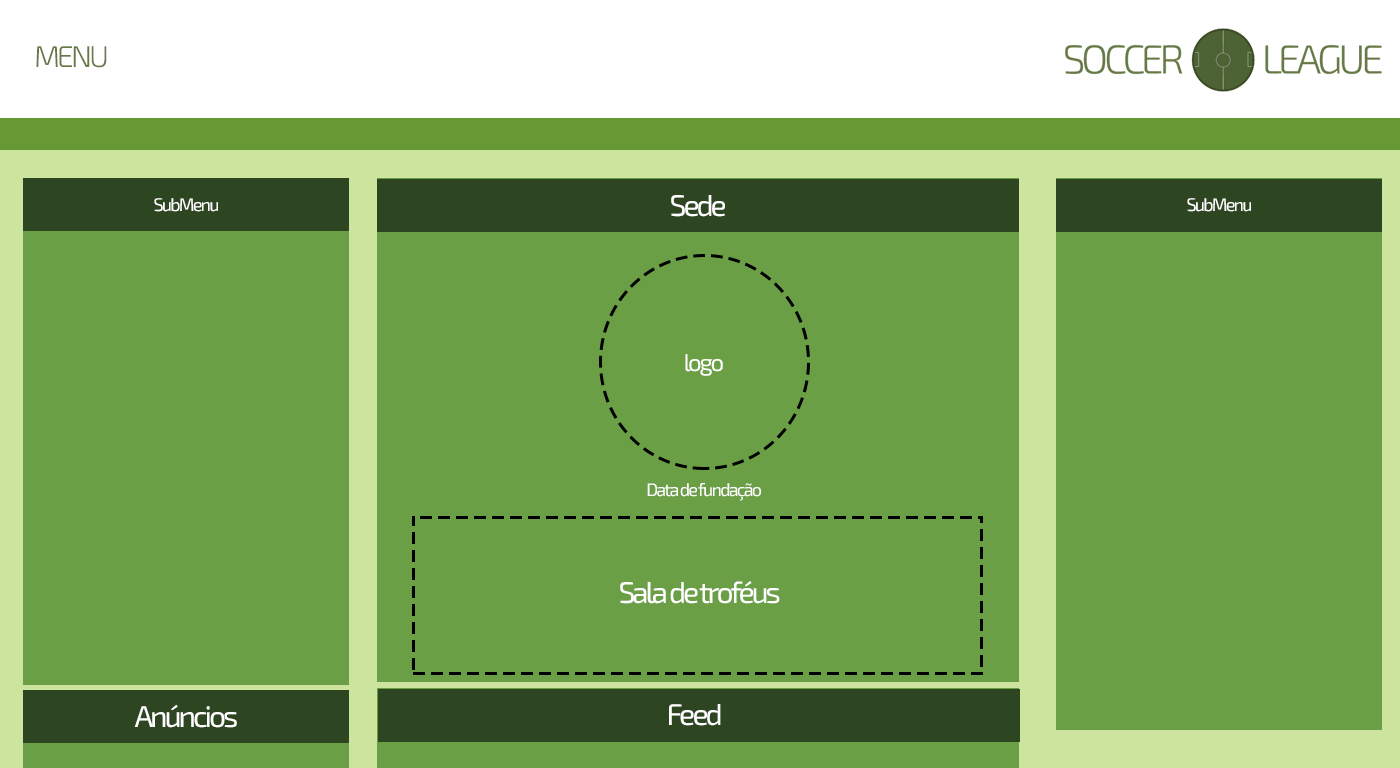
<style>
.page{position:relative;width:1400px;height:768px;background:#6a9f46}
.page>*{position:absolute;margin:0}
.t1{font:30px "Exo2-Light";letter-spacing:-0.1em;color:#667846}
.t2{font:18px "Exo2-Regular";letter-spacing:-0.1em;color:#ffffff}
.t3{font:30px "Exo2-Regular";letter-spacing:-0.1em;color:#ffffff}
.t4{font:24px "Exo2-Regular";letter-spacing:-0.1em;color:#ffffff}
</style>
<div class="page">
<p class="t1" style="left:36px;top:46px;width:71px;height:22px">MENU</p>
<p class="t2" style="left:154px;top:198px;width:64px;height:14px">SubMenu</p>
<p class="t3" style="left:671px;top:195px;width:54px;height:22px">Sede</p>
<p class="t2" style="left:1187px;top:198px;width:64px;height:14px">SubMenu</p>
<p class="t4" style="left:685px;top:354px;width:38px;height:22px">logo</p>
<p class="t2" style="left:647px;top:483px;width:114px;height:18px">Data de fundação</p>
<p class="t3" style="left:620px;top:581px;width:160px;height:23px">Sala de troféus</p>
<p class="t3" style="left:134px;top:704px;width:103px;height:24px">Anúncios</p>
<p class="t3" style="left:669px;top:704px;width:52px;height:22px">Feed</p>
</div>
